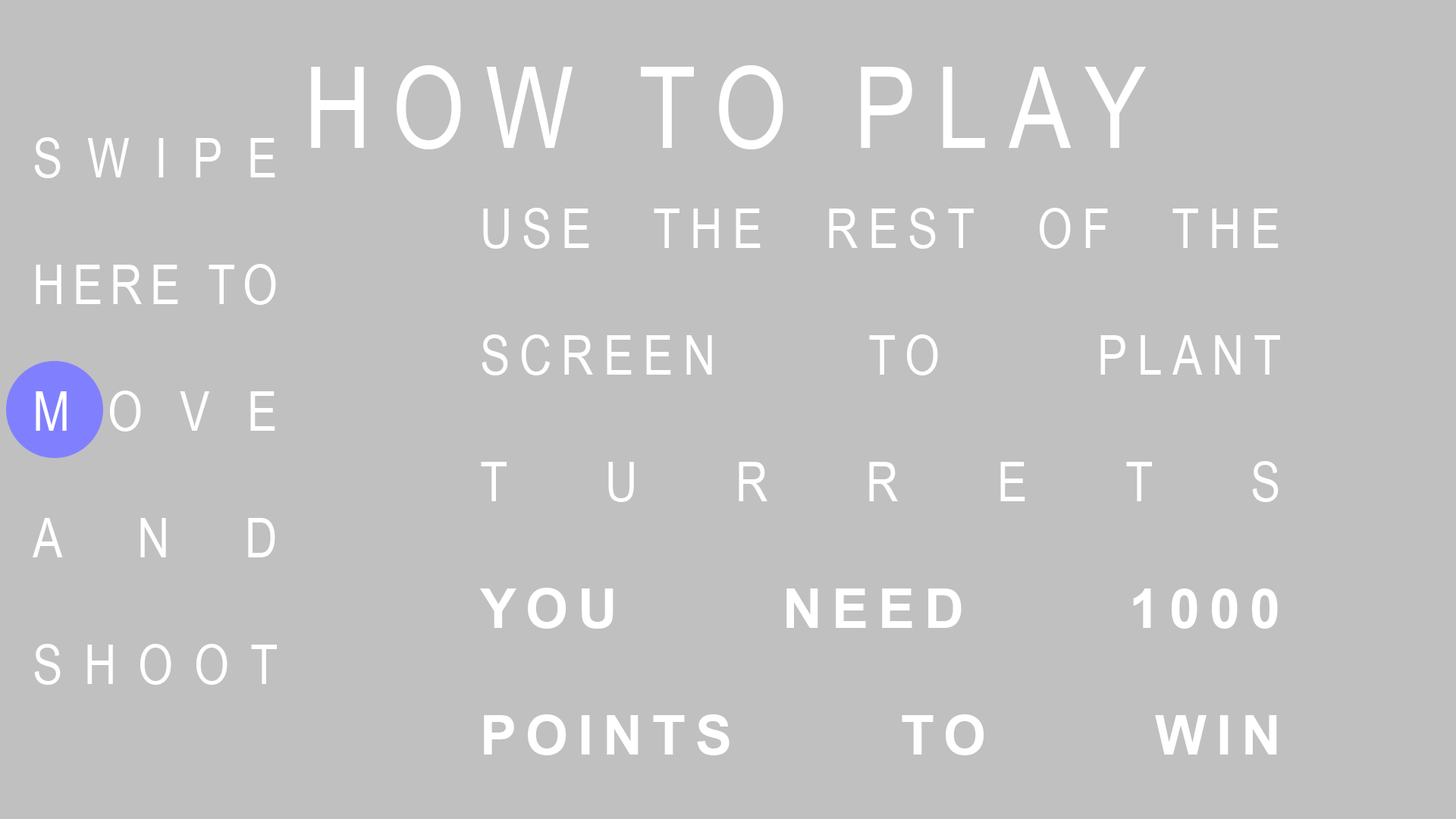
<style>
.page{position:relative;width:1456px;height:819px;background:#c0c0c0}
.page>*{position:absolute;margin:0}
.t1{font:113.7px "ArialNarrow";letter-spacing:0.18em;color:#ffffff}
.t2{font:54.6px/126.6px "ArialNarrow";letter-spacing:0.14em;color:#ffffff}
.t3{font:54.6px/126.6px "ArialNarrow";letter-spacing:0.18em;color:#ffffff}
.t4{font:54.6px/126.6px "Arial-BoldMT";letter-spacing:0.18em;color:#ffffff}
</style>
<div class="page">
<p class="t1" style="left:311px;top:65px;width:836px;height:84px">HOW TO PLAY</p>
<p class="t2" style="left:33px;top:137px;width:244px;height:548px;text-align:justify"><span class="t3"><br></span>SWIPE HERE TO MOVE AND SHOOT</p>
<p class="t3" style="left:480px;top:208px;width:800px;height:547px;text-align:justify">USE THE REST OF THE SCREEN TO PLANT TURRETS<br><span class="t4">YOU NEED 1000 POINTS TO WIN</span></p>
</div>
